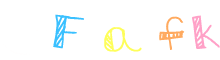
<style>
.page{position:relative;width:220px;height:60px;background:#ffffff}
.page>*{position:absolute;margin:0}
.t1{font:33.3px "Stripes-and-bubbles";letter-spacing:-0.075em;color:#3ac0ff}
.t2{font:33.3px "Stripes-and-bubbles";letter-spacing:-0.075em;color:#ffffff}
.t3{font:33.3px "Stripes-and-bubbles";letter-spacing:-0.075em;color:#fefe5a}
.t4{font:33.3px "Stripes-and-bubbles";letter-spacing:-0.075em;color:#ffaa5f}
.t5{font:33.3px "Stripes-and-bubbles";letter-spacing:-0.075em;color:#ffa1c7}
</style>
<div class="page">
<p class="t1" style="left:53px;top:14px;width:167px;height:38px">F<span class="t2">r</span><span class="t3">a</span><span class="t2">c</span><span class="t4">f</span><span class="t2">i</span><span class="t5">k</span></p>
</div>
